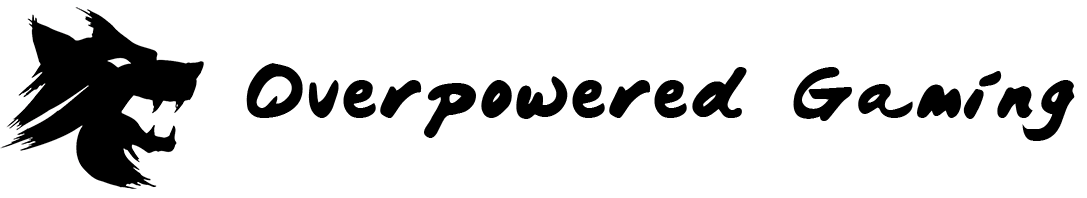
<style>
.page{position:relative;width:1087px;height:198px;background:#ffffff}
.page>*{position:absolute;margin:0}
.t1{font:60px "JapaneseBrush";color:#000000}
</style>
<div class="page">
<p class="t1" style="left:246px;top:63px;width:829px;height:78px">Overpowered Gaming</p>
</div>
